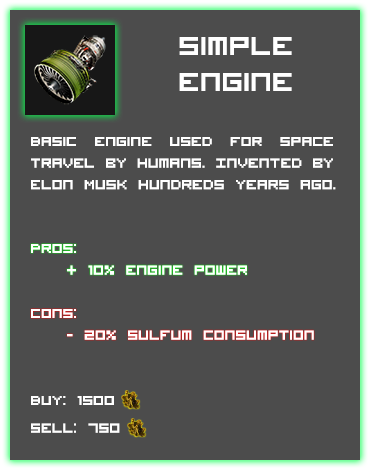
<style>
.page{position:relative;width:370px;height:470px;background:#4c4c4c}
.page>*{position:absolute;margin:0}
.t1{font:36px/12px "VisitorTT1BRK";color:#ffffff}
.t2{font:18px "VisitorTT1BRK";color:#ffffff}
</style>
<div class="page">
<p class="t1" style="left:179px;top:37px;width:113px;height:54px;text-align:center">Simple <br><br><br>Engine</p>
<p class="t2" style="left:31px;top:137px;width:305px;height:53px;text-align:justify">Basic engine used for space travel by humans. Invented by Elon Musk hundreds years ago.</p>
<p class="t2" style="left:31px;top:244px;width:216px;height:31px;text-align:justify">Pros:<br> + 10% engine power</p>
<p class="t2" style="left:31px;top:309px;width:283px;height:31px;text-align:justify">Cons:<br> - 20% sulfum consumption</p>
<p class="t2" style="left:31px;top:396px;width:89px;height:37px">Buy: 1500 <br><br>Sell: 750</p>
</div>
